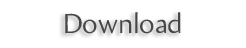
<style>
.page{position:relative;width:246px;height:48px;background:#ffffff}
.page>*{position:absolute;margin:0}
.t1{font:28px "Amira-Roman";color:#474747}
</style>
<div class="page">
<p class="t1" style="left:65px;top:12px;width:116px;height:22px">Download</p>
</div>
